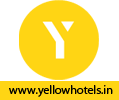
<style>
.page{position:relative;width:119px;height:100px;background:#ffd514}
.page>*{position:absolute;margin:0}
.t1{font:12px "MyriadPro-Regular";color:#000000}
</style>
<div class="page">
<p class="t1" style="left:9px;top:85px;width:104px;height:12px">www.yellowhotels.in</p>
</div>
